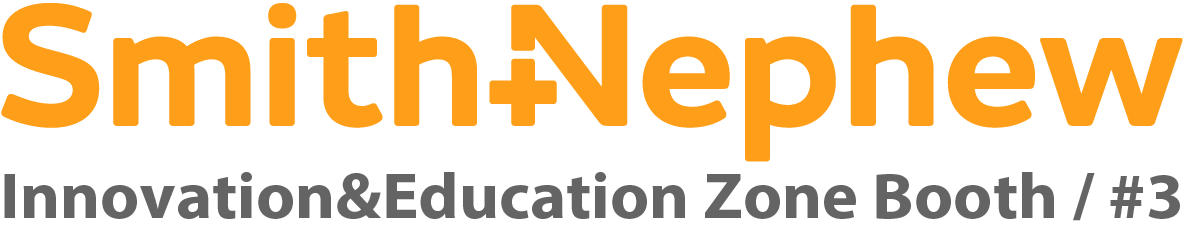
<style>
.page{position:relative;width:1184px;height:252px;background:#ffffff}
.page>*{position:absolute;margin:0}
.t1{font:65.1px "MyriadPro-Bold";color:#656464;scale:1.05 1}
</style>
<div class="page">
<p class="t1" style="left:4px;top:172px;width:1176px;height:49px">Innovation&amp;Education Zone Booth / #3</p>
</div>
